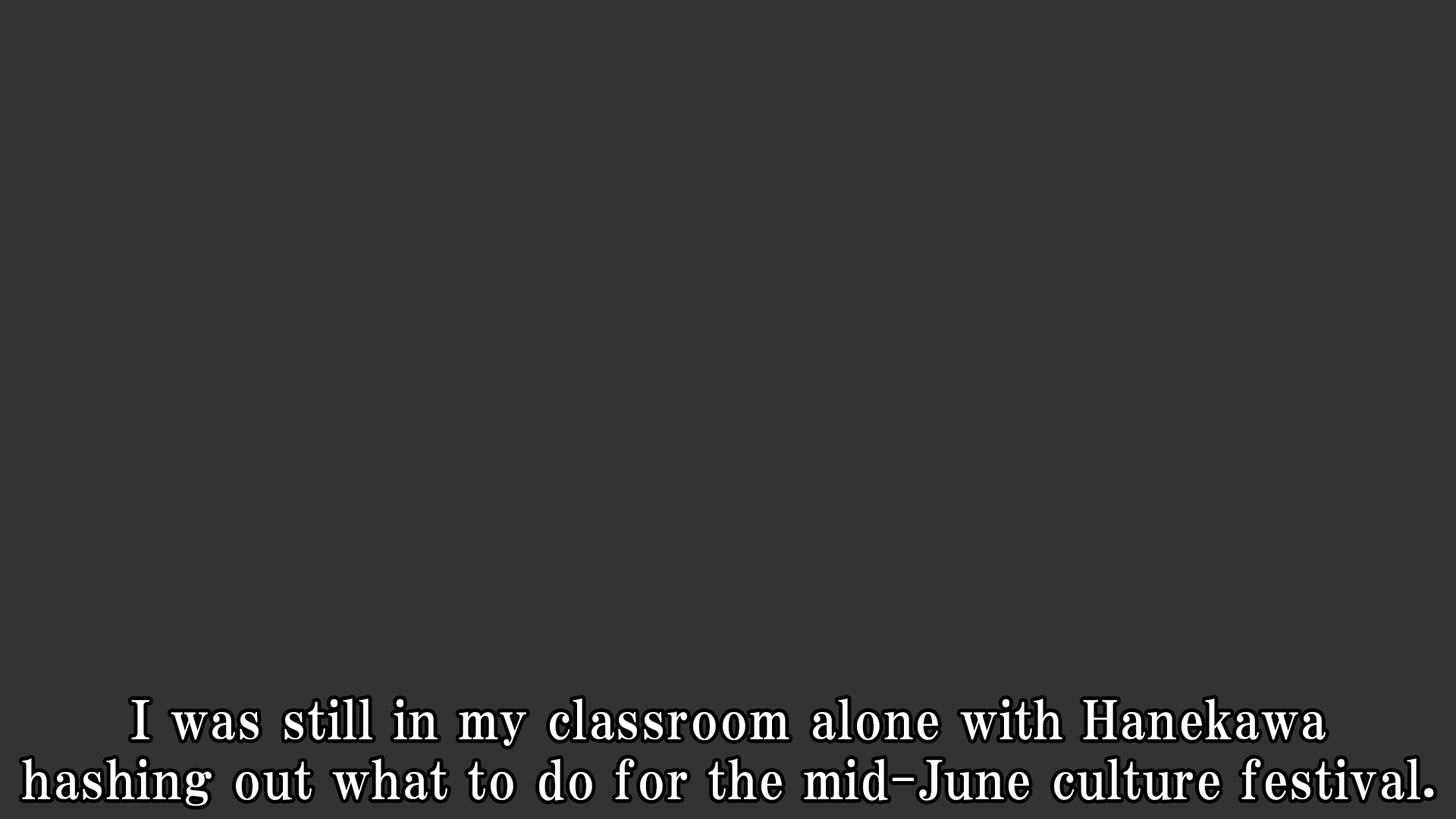
<style>
.page{position:relative;width:1456px;height:819px;background:#333333}
.page>*{position:absolute;margin:0}
.t1{font:53.1px/59.9px "HGPMinchoE";letter-spacing:0.025em;color:#ffffff}
</style>
<div class="page">
<p class="t1" style="left:22px;top:698px;width:1412px;height:108px;text-align:center">I was still in my classroom alone with Hanekawa<br>hashing out what to do for the mid-June culture festival.</p>
</div>
